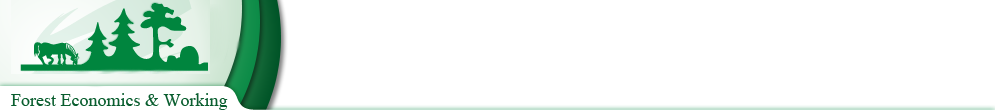
<style>
.page{position:relative;width:995px;height:110px;background:#ffffff}
.page>*{position:absolute;margin:0}
.t1{font:18px "TimesNewRomanPSMT";color:#0a5e2f}
</style>
<div class="page">
<p class="t1" style="left:11px;top:93px;width:217px;height:17px">Forest Economics &amp; Working</p>
</div>
